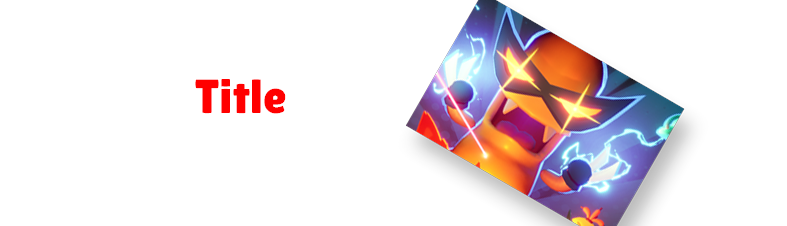
<style>
.page{position:relative;width:787px;height:226px;background:#ffffff}
.page>*{position:absolute;margin:0}
.t1{font:48px "LilitaOne";color:#ff0000}
</style>
<div class="page">
<p class="t1" style="left:195px;top:79px;width:91px;height:35px">Title</p>
</div>
